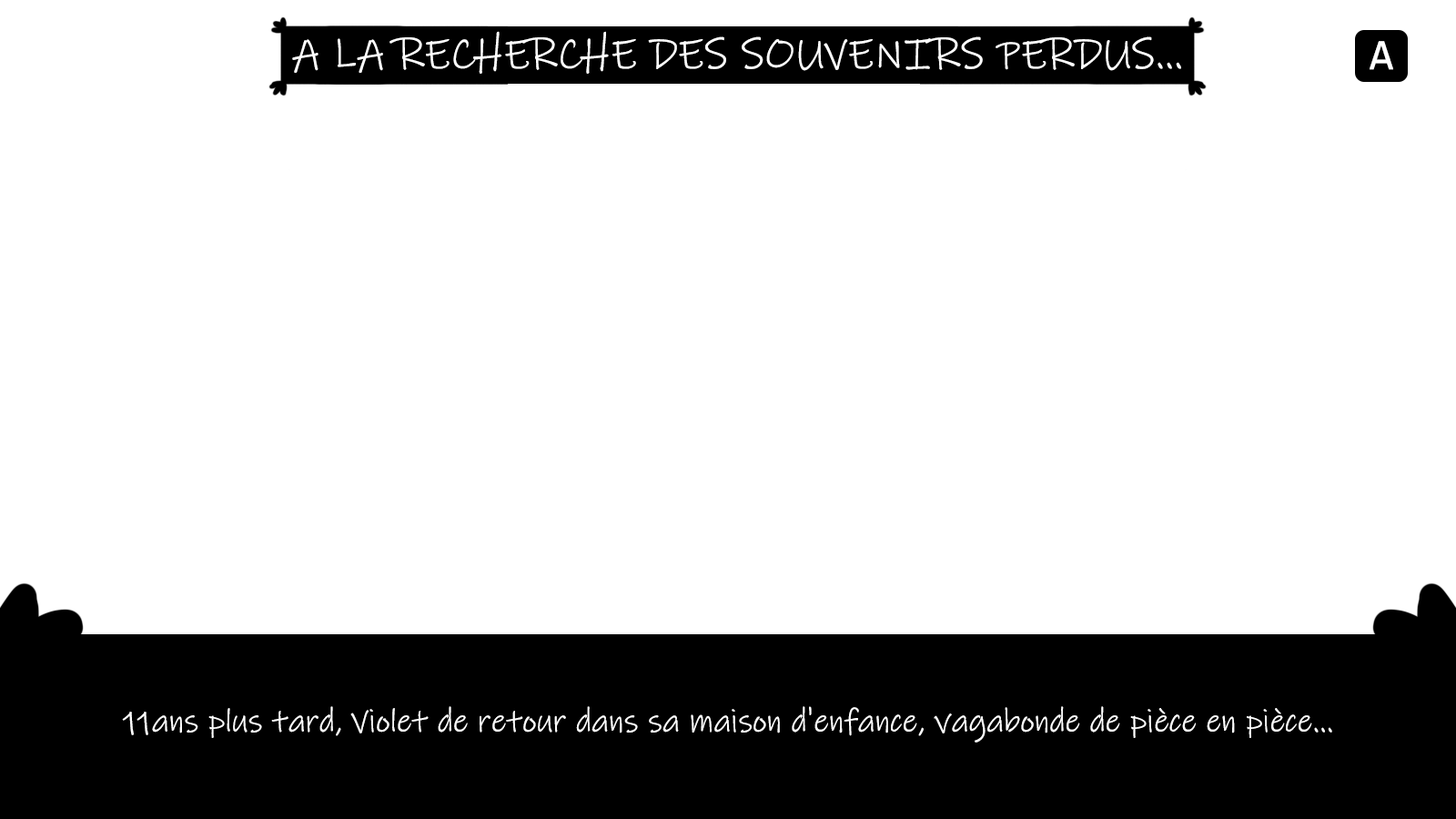
<style>
.page{position:relative;width:1456px;height:819px;background:#ffffff}
.page>*{position:absolute;margin:0}
.t1{font:43.7px "InkFree";color:#ffffff}
.t2{font:43.7px "Consolas";color:#ffffff}
.t3{font:32.8px "InkFree";color:#ffffff}
</style>
<div class="page">
<p class="t1" style="left:292px;top:31px;width:889px;height:43px">A LA RECHERCHE DES SOUVENIRS PERDUS...</p>
<p class="t2" style="left:1370px;top:41px;width:23px;height:29px">A</p>
<p class="t3" style="left:122px;top:706px;width:1210px;height:37px">11ans plus tard, Violet de retour dans sa maison d'enfance, vagabonde de pièce en pièce...</p>
</div>
